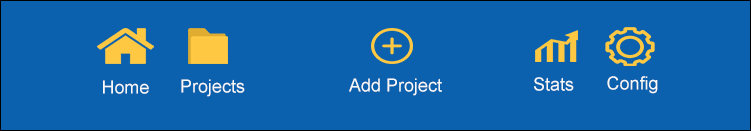
<style>
.page{position:relative;width:751px;height:131px;background:#0b61ae}
.page>*{position:absolute;margin:0}
.t1{font:18px "ArialMT";color:#f9f9f8}
</style>
<div class="page">
<p class="t1" style="left:349px;top:78px;width:93px;height:18px">Add Project</p>
<p class="t1" style="left:534px;top:77px;width:40px;height:14px">Stats</p>
<p class="t1" style="left:607px;top:76px;width:51px;height:18px">Config</p>
<p class="t1" style="left:103px;top:80px;width:46px;height:14px">Home</p>
<p class="t1" style="left:181px;top:79px;width:64px;height:18px">Projects</p>
</div>
